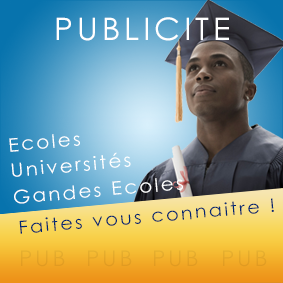
<style>
.page{position:relative;width:283px;height:283px}
.page>*{position:absolute;margin:0}
.t1{font:30.9px "CenturyGothic";letter-spacing:0.12em;color:#ffffff;scale:1.04 1}
.t2{font:18.6px "CenturyGothic";letter-spacing:0.12em;color:#ffffff;scale:1.06 1}
.t3{font:18px "CenturyGothic";letter-spacing:0.12em;color:#032571;scale:1.07 1}
.t4{font:21.4px "CenturyGothic";letter-spacing:0.12em;color:#e3a729;scale:1.05 1}
</style>
<div class="page">
<p class="t1" style="left:56px;top:17px;width:173px;height:24px">PUBLICITE</p>
<p class="t2" style="left:9px;top:134px;width:71px;height:18px;rotate:-5deg">Ecoles</p>
<p class="t2" style="left:11px;top:152px;width:120px;height:25px;rotate:-5deg">Universités</p>
<p class="t2" style="left:14px;top:178px;width:169px;height:26px;rotate:-5deg">Gandes Ecoles</p>
<p class="t3" style="left:19px;top:198px;width:255px;height:36px;rotate:-5deg">Faites vous connaitre !</p>
<p class="t4" style="left:21px;top:250px;width:44px;height:17px">PUB</p>
<p class="t4" style="left:88px;top:250px;width:44px;height:17px">PUB</p>
<p class="t4" style="left:154px;top:250px;width:44px;height:17px">PUB</p>
<p class="t4" style="left:223px;top:250px;width:44px;height:17px">PUB</p>
</div>
